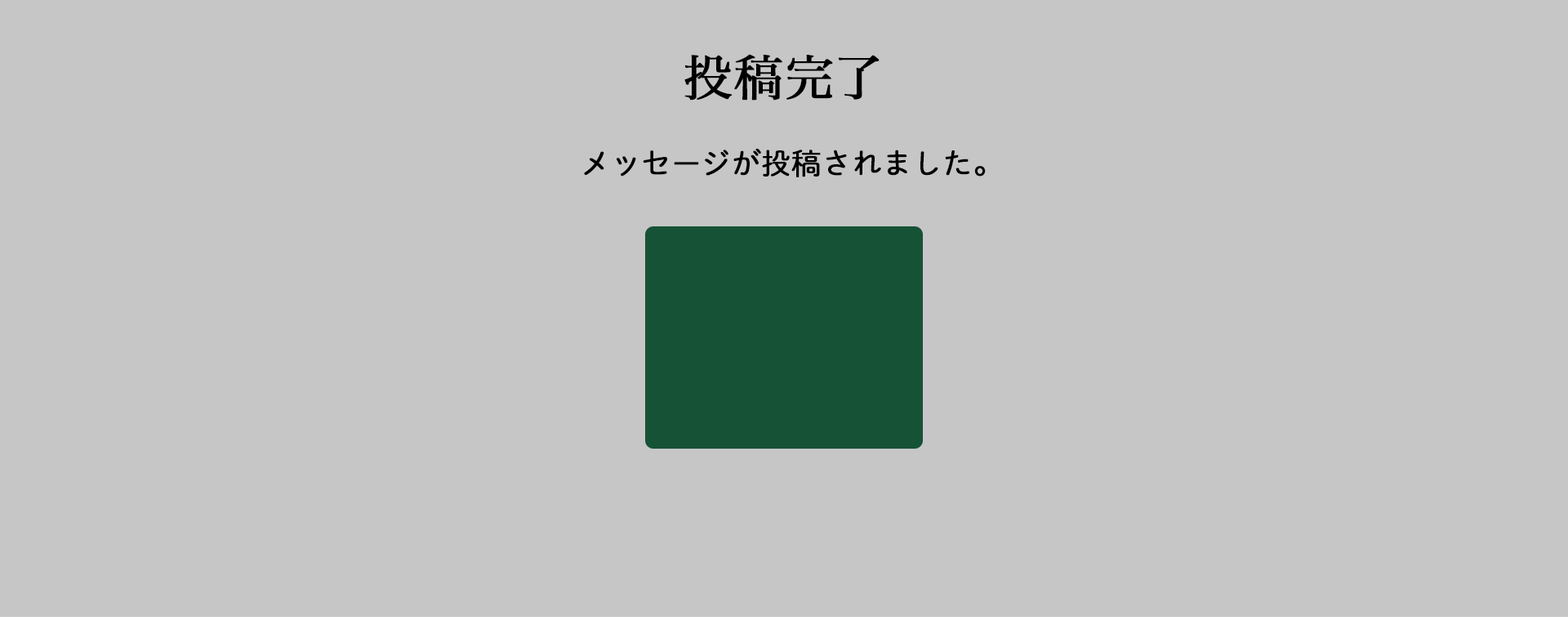
<style>
.page{position:relative;width:1568px;height:617px;background:#c6c6c6}
.page>*{position:absolute;margin:0}
.t1{font:49px "HiraMinPro-W3";color:#000000;font-weight:bold}
.t2{font:29.4px "DNPShueiMGoStd-L";color:#000000;font-weight:bold}
</style>
<div class="page">
<p class="t1" style="left:684px;top:54px;width:196px;height:46px">投稿完了</p>
<p class="t2" style="left:584px;top:149px;width:402px;height:28px">メッセージが投稿されました。</p>
</div>
